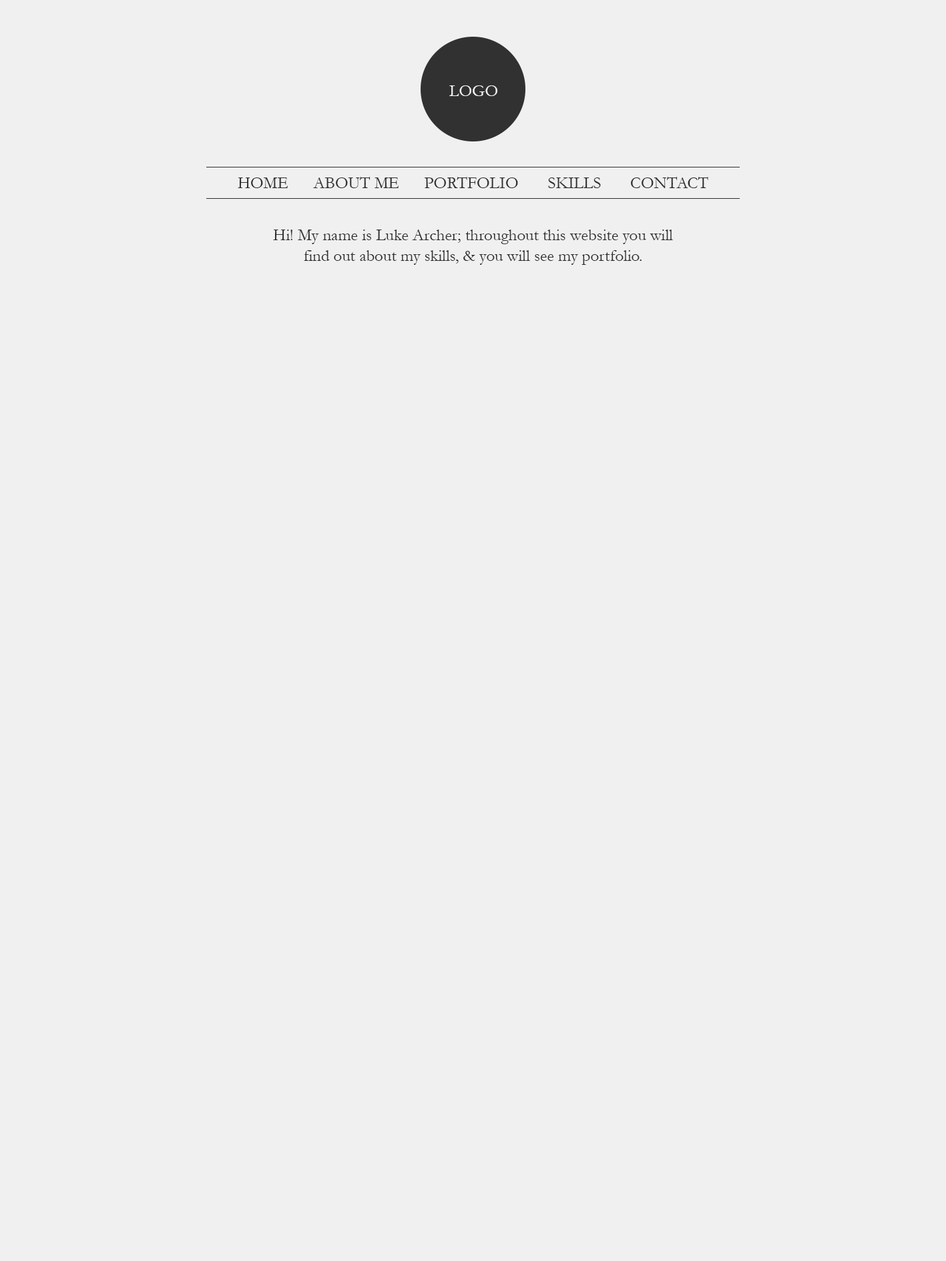
<style>
.page{position:relative;width:946px;height:1261px;background:#f0f0f0}
.page>*{position:absolute;margin:0}
.t1{font:16.7px "Garamond";color:#f0f0f0}
.t2{font:16.7px "Garamond";color:#2f2f2f}
</style>
<div class="page">
<p class="t1" style="left:449px;top:85px;width:48px;height:11px">LOGO</p>
<p class="t2" style="left:238px;top:177px;width:470px;height:11px">HOME      ABOUT ME      PORTFOLIO       SKILLS       CONTACT</p>
<p class="t2" style="left:273px;top:230px;width:400px;height:35px;text-align:center">Hi! My name is Luke Archer; throughout this website you will find out about my skills, &amp; you will see my portfolio.</p>
</div>
